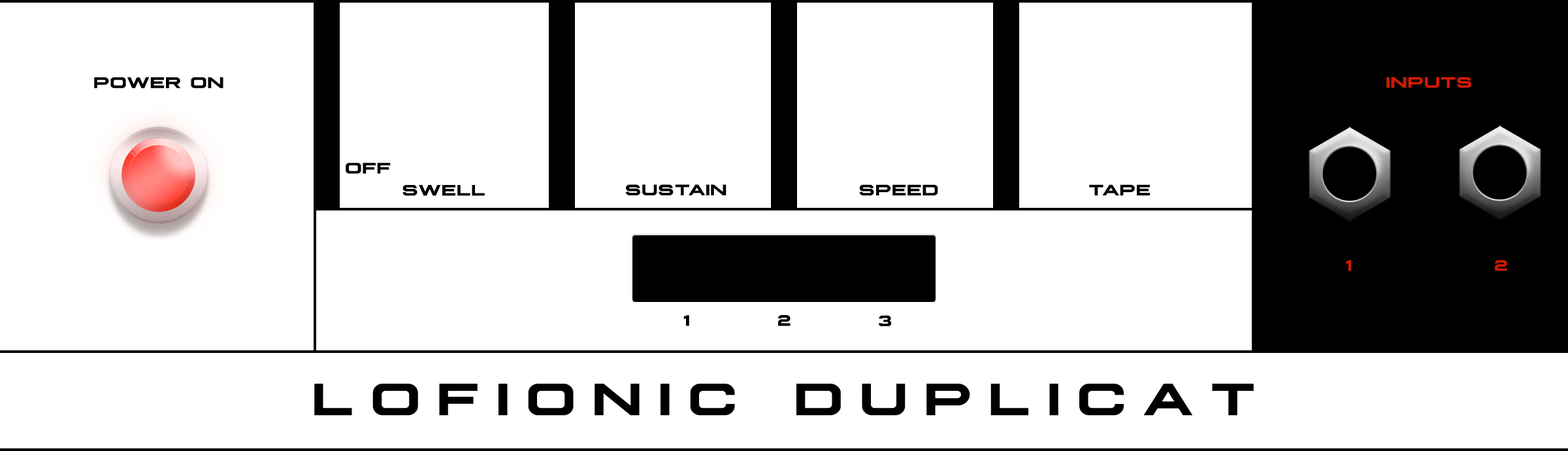
<style>
.page{position:relative;width:1568px;height:451px;background:#ffffff}
.page>*{position:absolute;margin:0}
.t1{font:15.7px "Plateia-Bold";letter-spacing:0.05em;color:#000000;text-transform:uppercase}
.t2{font:47px "Plateia-Bold";letter-spacing:0.37em;color:#000000;text-transform:uppercase}
</style>
<div class="page">
<p class="t1" style="left:346px;top:163px;width:45px;height:11px">OFF</p>
<p class="t1" style="left:402px;top:185px;width:83px;height:11px">swell</p>
<p class="t1" style="left:626px;top:184px;width:101px;height:11px">sustain</p>
<p class="t1" style="left:859px;top:184px;width:79px;height:11px">speed</p>
<p class="t1" style="left:1089px;top:184px;width:61px;height:11px">tape</p>
<p class="t1" style="left:683px;top:315px;width:6px;height:11px">1</p>
<p class="t1" style="left:778px;top:315px;width:13px;height:11px">2</p>
<p class="t1" style="left:879px;top:315px;width:13px;height:11px">3</p>
<p class="t2" style="left:314px;top:384px;width:940px;height:32px">LOFIONIC DUPLICAT</p>
</div>
